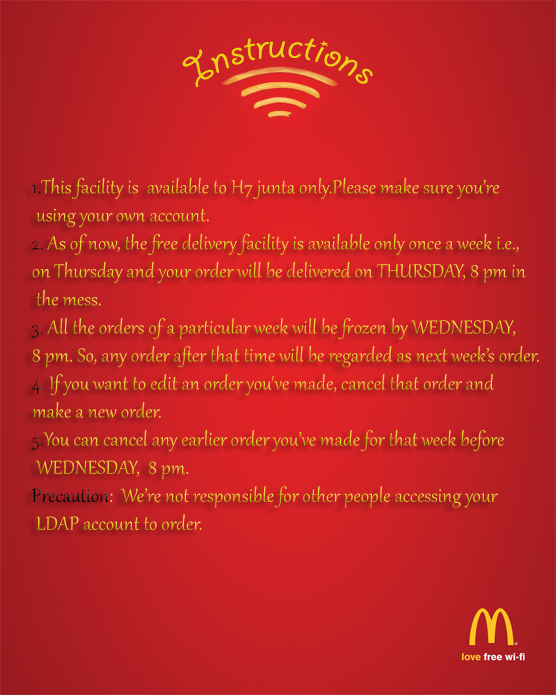
<style>
.page{position:relative;width:556px;height:695px}
.page>*{position:absolute;margin:0}
.t1{font:43.1px "GiddyupStd";color:#ebd416}
.t2{font:23.4px "Gabriola"}
</style>
<div class="page">
<p class="t1" style="left:182px;top:38px;width:191px;height:50px">Instructions</p>
<p class="t2" style="left:31px;top:177px;width:508px;height:353px">1.This facility is  available to H7 junta only.Please make sure you’re<br> using your own account.<br>2. As of now, the free delivery facility is available only once a week i.e., <br>on Thursday and your order will be delivered on THURSDAY, 8 pm in<br> the mess.<br>3. All the orders of a particular week will be frozen by WEDNESDAY, <br>8 pm. So, any order after that time will be regarded as next week’s order.<br>4. If you want to edit an order you've made, cancel that order and <br>make a new order.<br>5.You can cancel any earlier order you’ve made for that week before<br> WEDNESDAY,  8 pm.<br>Precaution:  We’re not responsible for other people accessing your<br> LDAP account to order.</p>
</div>
